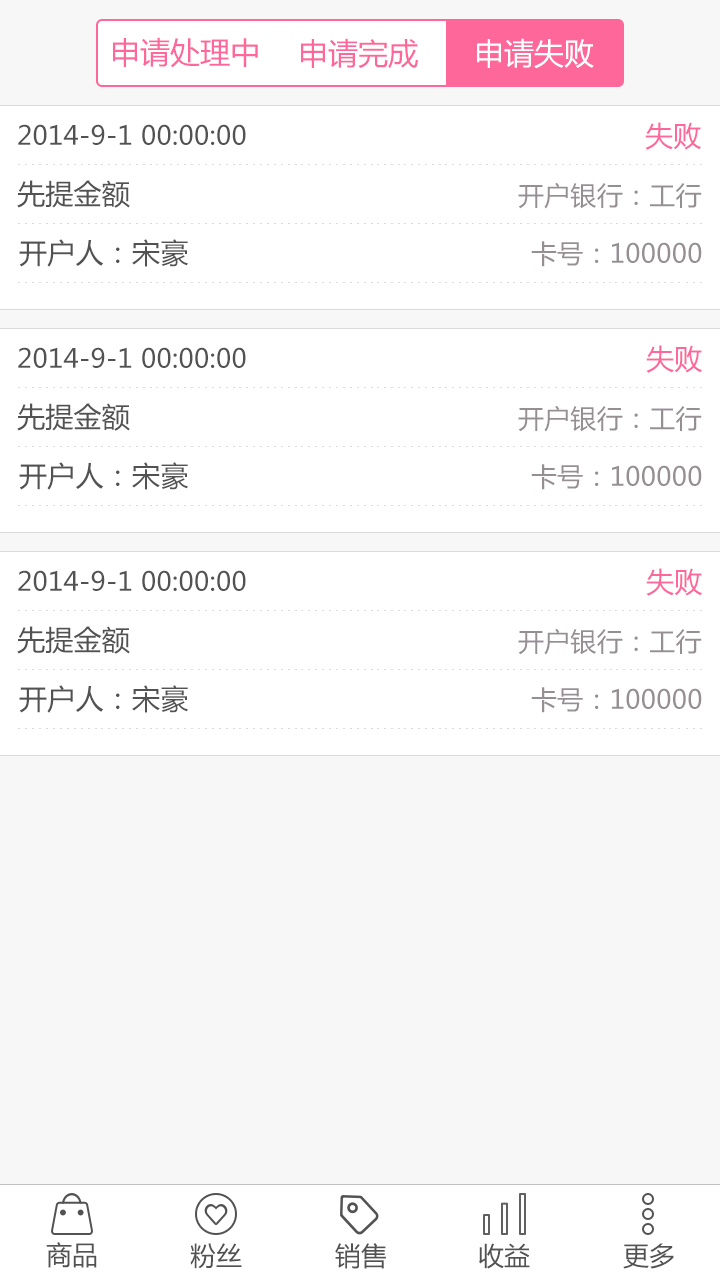
<style>
.page{position:relative;width:720px;height:1280px;background:#ffffff}
.page>*{position:absolute;margin:0}
.t1{font:30px "MicrosoftYaHei";color:#fd679a}
.t2{font:30px "MicrosoftYaHei";color:#ffffff}
.t3{font:26px "MicrosoftYaHei";letter-spacing:0.01em;color:#525252}
.t4{font:28px "MicrosoftYaHei";letter-spacing:0.01em;color:#fd679a}
.t5{font:28px "MicrosoftYaHei";letter-spacing:0.01em;color:#525252}
.t6{font:26px "MicrosoftYaHei";letter-spacing:0.01em;color:#958f93}
.t7{font:26px "MicrosoftYaHei";color:#525252}
</style>
<div class="page">
<p class="t1" style="left:113px;top:37px;width:145px;height:31px">申请处理中</p>
<p class="t1" style="left:301px;top:38px;width:117px;height:30px">申请完成</p>
<p class="t2" style="left:477px;top:38px;width:117px;height:31px">申请失败</p>
<p class="t3" style="left:18px;top:124px;width:228px;height:21px">2014-9-1 00:00:00</p>
<p class="t4" style="left:645px;top:122px;width:56px;height:28px">失败</p>
<p class="t5" style="left:17px;top:180px;width:113px;height:28px">先提金额</p>
<p class="t6" style="left:518px;top:182px;width:184px;height:27px">开户银行：工行</p>
<p class="t5" style="left:19px;top:239px;width:169px;height:28px">开户人：宋豪</p>
<p class="t6" style="left:531px;top:241px;width:171px;height:26px">卡号：100000</p>
<p class="t3" style="left:18px;top:347px;width:228px;height:21px">2014-9-1 00:00:00</p>
<p class="t4" style="left:646px;top:345px;width:56px;height:28px">失败</p>
<p class="t5" style="left:17px;top:403px;width:113px;height:28px">先提金额</p>
<p class="t6" style="left:518px;top:405px;width:184px;height:27px">开户银行：工行</p>
<p class="t5" style="left:19px;top:462px;width:169px;height:28px">开户人：宋豪</p>
<p class="t6" style="left:531px;top:464px;width:171px;height:26px">卡号：100000</p>
<p class="t4" style="left:646px;top:568px;width:56px;height:28px">失败</p>
<p class="t3" style="left:18px;top:570px;width:228px;height:21px">2014-9-1 00:00:00</p>
<p class="t5" style="left:17px;top:626px;width:113px;height:28px">先提金额</p>
<p class="t6" style="left:518px;top:628px;width:184px;height:27px">开户银行：工行</p>
<p class="t5" style="left:19px;top:685px;width:169px;height:28px">开户人：宋豪</p>
<p class="t6" style="left:531px;top:687px;width:171px;height:26px">卡号：100000</p>
<p class="t7" style="left:46px;top:1242px;width:51px;height:26px">商品</p>
<p class="t7" style="left:190px;top:1243px;width:52px;height:26px">粉丝</p>
<p class="t7" style="left:335px;top:1243px;width:51px;height:26px">销售</p>
<p class="t7" style="left:479px;top:1243px;width:51px;height:26px">收益</p>
<p class="t7" style="left:623px;top:1243px;width:51px;height:26px">更多</p>
</div>
